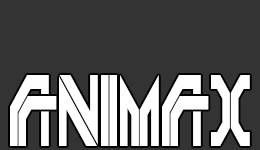
<style>
.page{position:relative;width:260px;height:150px;background:#333333}
.page>*{position:absolute;margin:0}
.t1{font:98.7px "DEPLETEDURANIUM";color:#ffffff;scale:0.55 1}
</style>
<div class="page">
<p class="t1" style="left:10px;top:75px;width:240px;height:71px">ANIMAX</p>
</div>
